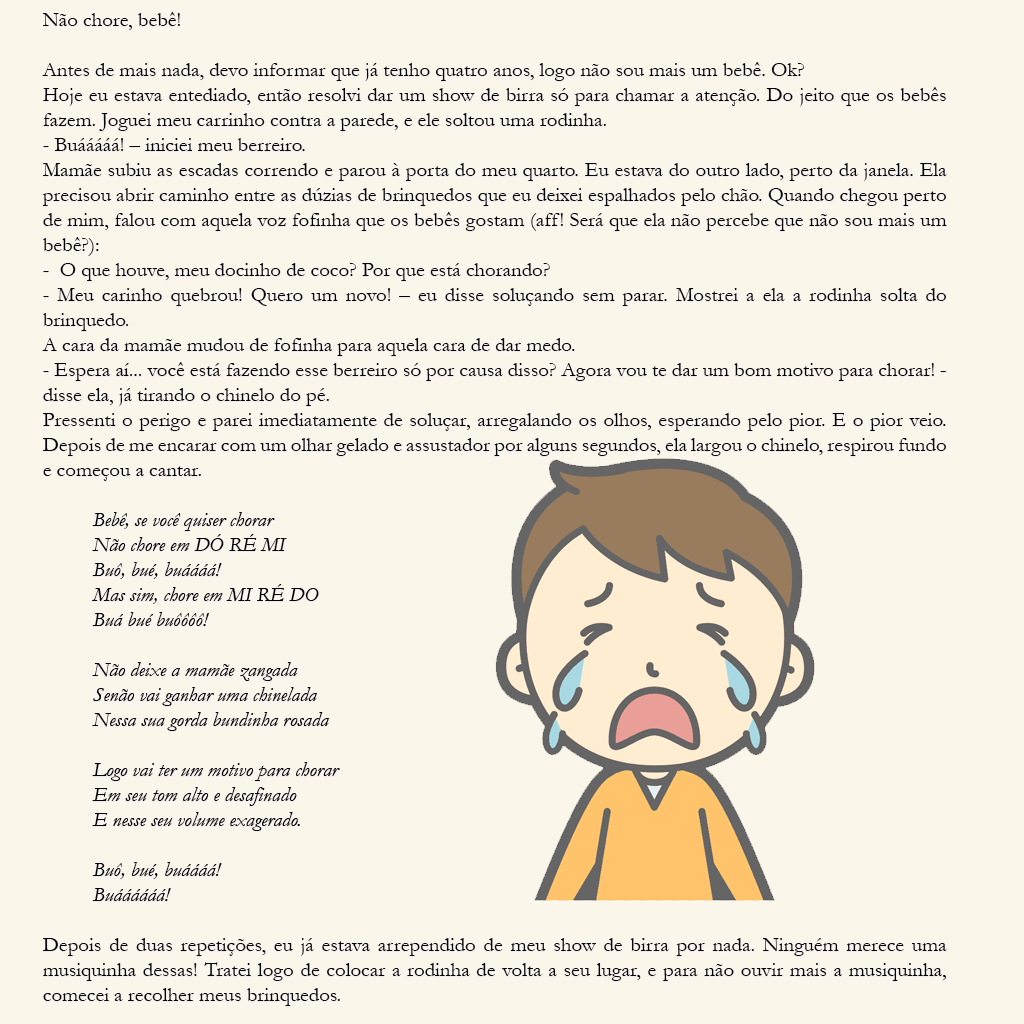
<style>
.page{position:relative;width:1024px;height:1024px;background:#fbf6ea}
.page>*{position:absolute;margin:0}
.t1{font:20.8px "Garamond";color:#00040a}
.t2{font:20.8px "Garamond-Italic";color:#00040a}
</style>
<div class="page">
<p class="t1" style="left:42px;top:12px;width:905px;height:994px;text-align:justify">Não chore, bebê!<br><br>Antes de mais nada, devo informar que já tenho quatro anos, logo não sou mais um bebê. Ok? <br>Hoje eu estava entediado, então resolvi dar um show de birra só para chamar a atenção. Do jeito que os bebês fazem. Joguei meu carrinho contra a parede, e ele soltou uma rodinha.<br>- Buááááá! – iniciei meu berreiro.<br>Mamãe subiu as escadas correndo e parou à porta do meu quarto. Eu estava do outro lado, perto da janela. Ela precisou abrir caminho entre as dúzias de brinquedos que eu deixei espalhados pelo chão. Quando chegou perto de mim, falou com aquela voz fofinha que os bebês gostam (aff! Será que ela não percebe que não sou mais um bebê?):<br>-  O que houve, meu docinho de coco? Por que está chorando?<br>- Meu carinho quebrou! Quero um novo! – eu disse soluçando sem parar. Mostrei a ela a rodinha solta do brinquedo.<br>A cara da mamãe mudou de fofinha para aquela cara de dar medo.<br>- Espera aí... você está fazendo esse berreiro só por causa disso? Agora vou te dar um bom motivo para chorar! - disse ela, já tirando o chinelo do pé.<br>Pressenti o perigo e parei imediatamente de soluçar, arregalando os olhos, esperando pelo pior. E o pior veio. Depois de me encarar com um olhar gelado e assustador por alguns segundos, ela largou o chinelo, respirou fundo e começou a cantar.<br><br><span class="t2">Bebê, se você quiser chorar<br>Não chore em DÓ RÉ MI<br>Buô, bué, buáááá!<br>Mas sim, chore em MI RÉ DO<br>Buá bué buôôôô!<br><br>Não deixe a mamãe zangada<br>Senão vai ganhar uma chinelada<br>Nessa sua gorda bundinha rosada<br><br>Logo vai ter um motivo para chorar<br>Em seu tom alto e desafinado<br>E nesse seu volume exagerado.<br><br>Buô, bué, buáááá!<br>Buáááááá!<br></span><br>Depois de duas repetições, eu já estava arrependido de meu show de birra por nada. Ninguém merece uma musiquinha dessas! Tratei logo de colocar a rodinha de volta a seu lugar, e para não ouvir mais a musiquinha, comecei a recolher meus brinquedos.</p>
</div>
